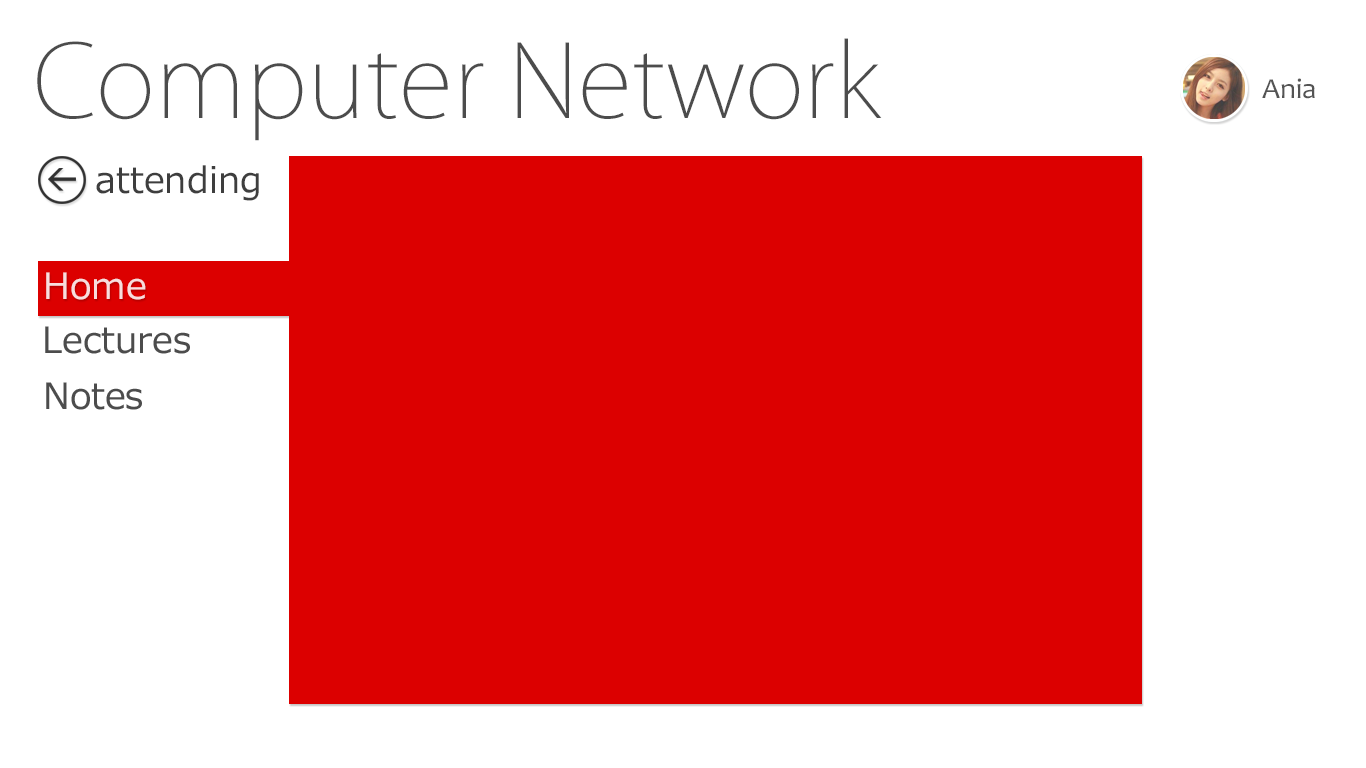
<style>
.page{position:relative;width:1366px;height:768px;background:#ffffff}
.page>*{position:absolute;margin:0}
.t1{font:100px "KozGoPr6N-ExtraLight";color:#4c4c4c}
.t2{font:29.2px "Candara";color:#545454}
.t3{font:36px "Meiryo";color:#3e3e3e}
.t4{font:36px "Meiryo";color:#f8dddd}
.t5{font:36px "Meiryo";color:#4c4c4c}
</style>
<div class="page">
<p class="t1" style="left:37px;top:38px;width:845px;height:103px">Computer Network</p>
<p class="t2" style="left:1262px;top:78px;width:53px;height:21px">Ania</p>
<p class="t3" style="left:96px;top:165px;width:163px;height:36px">attending</p>
<p class="t4" style="left:46px;top:272px;width:100px;height:28px">Home</p>
<p class="t5" style="left:45px;top:326px;width:145px;height:28px">Lectures</p>
<p class="t5" style="left:46px;top:382px;width:96px;height:28px">Notes</p>
</div>
